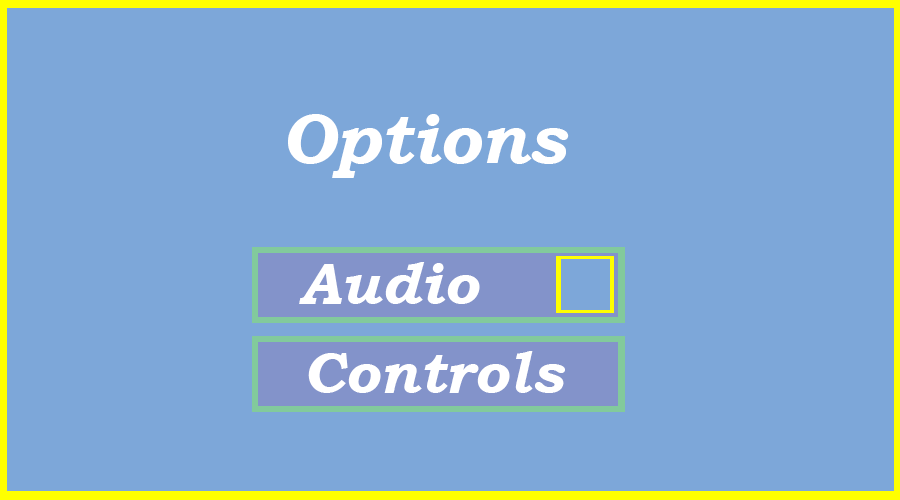
<style>
.page{position:relative;width:900px;height:500px;background:#7da7d9}
.page>*{position:absolute;margin:0}
.t1{font:70px "BookmanOldStyle-BoldItalic";color:#ffffff}
.t2{font:58.3px "BookmanOldStyle-BoldItalic";color:#ffffff}
</style>
<div class="page">
<p class="t1" style="left:288px;top:114px;width:281px;height:64px">Options</p>
<p class="t2" style="left:299px;top:262px;width:181px;height:42px">Audio</p>
<p class="t2" style="left:308px;top:351px;width:257px;height:42px">Controls</p>
</div>
